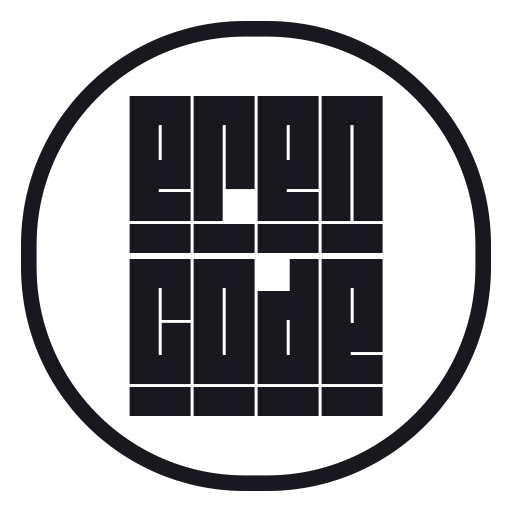
<style>
.page{position:relative;width:512px;height:512px;background:#ffffff}
.page>*{position:absolute;margin:0}
.t1{font:169.6px/162.5px "Blackout";color:#19181e}
</style>
<div class="page">
<p class="t1" style="left:129px;top:96px;width:254px;height:320px;text-align:center">EREN<br>CODE</p>
</div>
